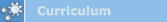
<style>
.page{position:relative;width:167px;height:22px;background:#8fbee8}
.page>*{position:absolute;margin:0}
.t1{font:12px "Verdana-Bold";color:#d4e4e8}
</style>
<div class="page">
<p class="t1" style="left:37px;top:6px;width:74px;height:10px">Curriculum</p>
</div>
